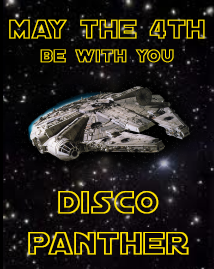
<style>
.page{position:relative;width:214px;height:269px}
.page>*{position:absolute;margin:0}
.t1{font:28.4px "DistantGalaxyOutline";color:#ffe400;font-weight:bold}
.t2{font:19.4px "DistantGalaxyOutline";color:#ffe400;font-weight:bold}
.t3{font:34px "DistantGalaxyOutline";color:#ffe400;font-weight:bold}
</style>
<div class="page">
<p class="t1" style="left:9px;top:19px;width:196px;height:44px;text-align:center">MAY The 4th<br><span class="t2">be with yoU</span></p>
<p class="t3" style="left:28px;top:191px;width:161px;height:64px;text-align:center">DISCO<br>PANTHER</p>
</div>
